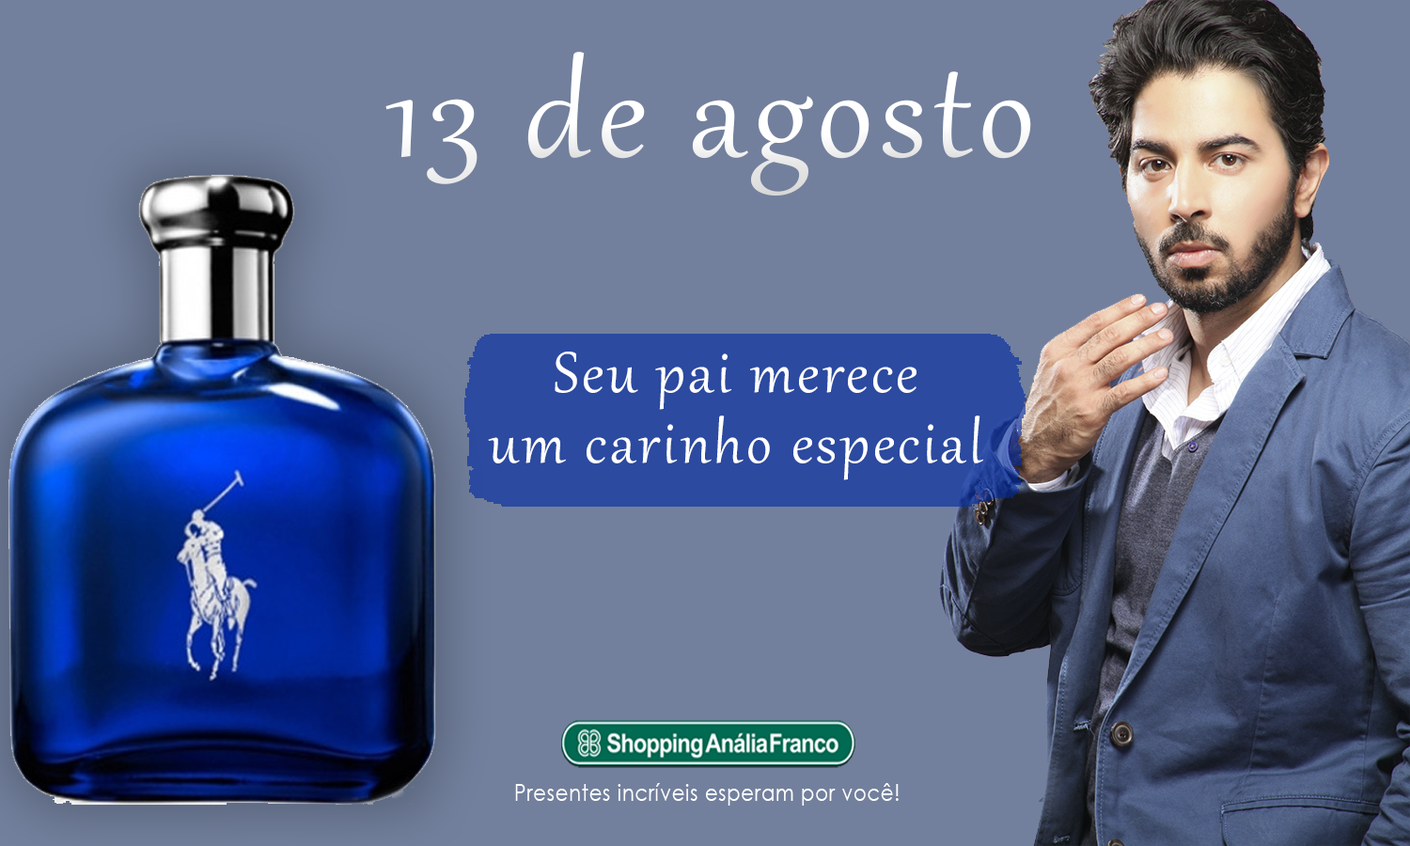
<style>
.page{position:relative;width:1410px;height:846px;background:#72809d}
.page>*{position:absolute;margin:0}
.t1{font:156.6px "Gabriola";letter-spacing:0.05em;color:#ffffff}
.t2{font:70.5px/70.5px "Gabriola";letter-spacing:0.05em;color:#ffffff}
.t3{font:23.2px "CenturyGothic";letter-spacing:0.05em;color:#ffffff;scale:0.83 1}
</style>
<div class="page">
<p class="t1" style="left:385px;top:52px;width:646px;height:144px">13 de agosto</p>
<p class="t2" style="left:488px;top:351px;width:495px;height:129px;text-align:center">Seu pai merece<br>um carinho especial</p>
<p class="t3" style="left:515px;top:783px;width:383px;height:22px">Presentes incríveis esperam por você!</p>
</div>
